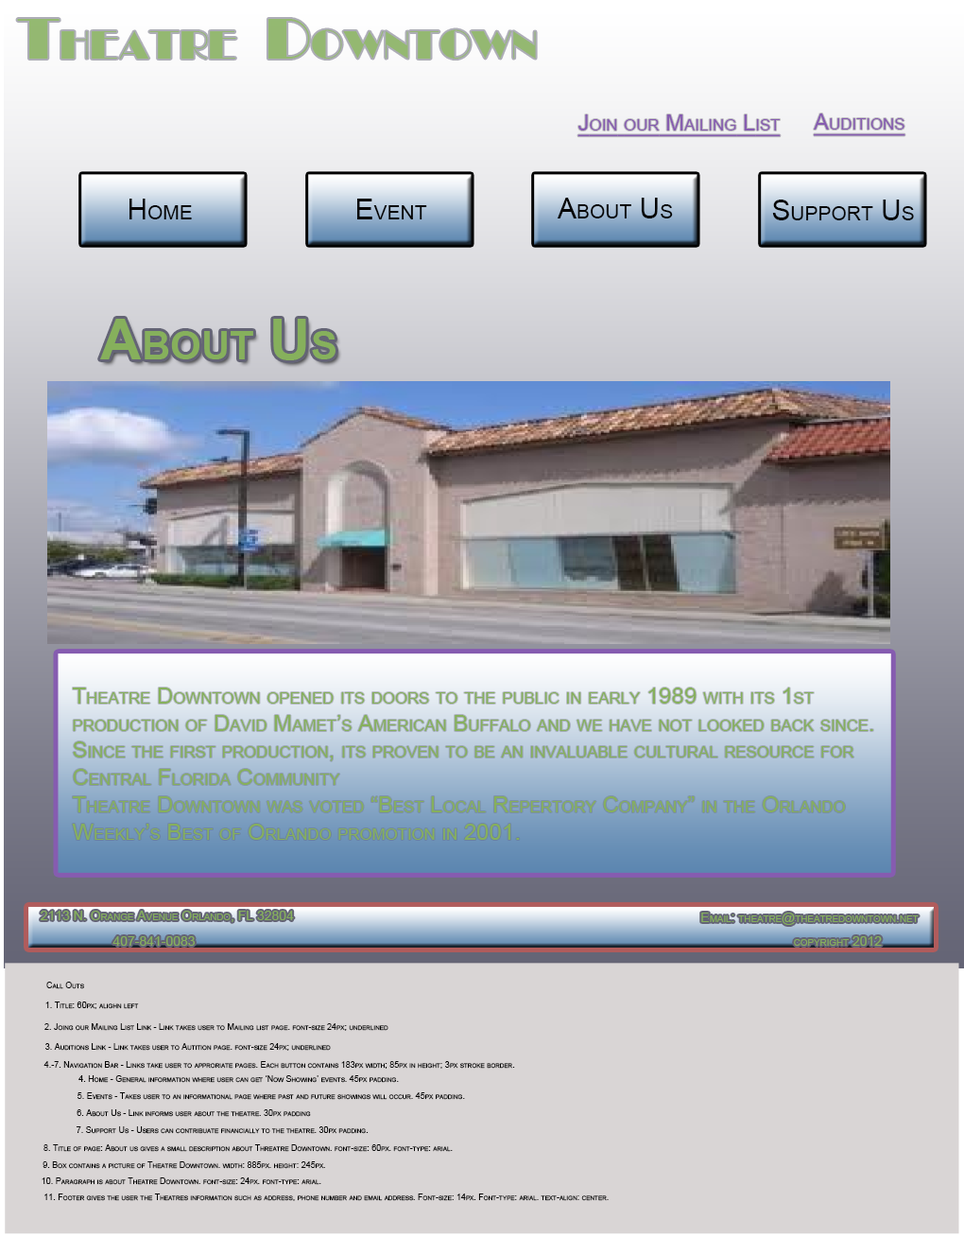
<style>
.page{position:relative;width:964px;height:1237px}
.page>*{position:absolute;margin:0}
.t1{font:56.7px "RitzFLF";color:#94b871;font-variant:small-caps}
.t2{font:22.7px "ArialMT";color:#865cb0;font-variant:small-caps;text-decoration:underline}
.t3{font:28.4px "ArialMT";color:#050505;font-variant:small-caps}
.t4{font:56.7px "Arial-BoldMT";color:#86b05c;font-variant:small-caps}
.t5{font:22.7px "ArialMT";color:#86b05c;font-variant:small-caps}
.t6{font:13.2px "ArialMT";color:#86b05c;font-variant:small-caps}
.t7{font:8.5px "ArialMT";color:#050505;font-variant:small-caps}
</style>
<div class="page">
<p class="t1" style="left:17px;top:19px;width:519px;height:40px">Theatre Downtown</p>
<p class="t2" style="left:814px;top:113px;width:92px;height:23px">Auditions</p>
<p class="t2" style="left:578px;top:114px;width:203px;height:23px">Join our Mailing List</p>
<p class="t3" style="left:557px;top:198px;width:116px;height:20px">About Us</p>
<p class="t3" style="left:130px;top:199px;width:62px;height:20px">Home</p>
<p class="t3" style="left:357px;top:199px;width:70px;height:20px">Event</p>
<p class="t3" style="left:772px;top:199px;width:142px;height:21px">Support Us</p>
<p class="t4" style="left:100px;top:319px;width:236px;height:41px">About Us</p>
<p class="t5" style="left:72px;top:687px;width:802px;height:153px">Theatre Downtown opened its doors to the public in early 1989 with its 1st <br>production of David Mamet’s American Buffalo and we have not looked back since. <br>Since the first production, its proven to be an invaluable cultural resource for <br>Central Florida Community<br>Theatre Downtown was voted “Best Local Repertory Company” in the Orlando <br>Weekly’s Best of Orlando promotion in 2001.</p>
<p class="t6" style="left:41px;top:910px;width:253px;height:12px">2113 N. Orange Avenue Orlando, FL 32804</p>
<p class="t6" style="left:701px;top:912px;width:218px;height:13px">Email: theatre@theatredowntown.net</p>
<p class="t6" style="left:113px;top:936px;width:82px;height:9px">407-841-0083</p>
<p class="t6" style="left:794px;top:936px;width:88px;height:9px">copyright 2012</p>
<p class="t7" style="left:46px;top:981px;width:38px;height:8px">Call Outs</p>
<p class="t7" style="left:45px;top:1001px;width:94px;height:8px">1. Title: 60px; alighn left</p>
<p class="t7" style="left:44px;top:1023px;width:345px;height:7px">2. Joing our Mailing List Link - Link takes user to Mailing list page. font-size 24px; underlined</p>
<p class="t7" style="left:45px;top:1043px;width:286px;height:7px">3. Auditions Link - Link takes user to Autition page. font-size 24px; underlined</p>
<p class="t7" style="left:43px;top:1061px;width:472px;height:7px">4.-7. Navigation Bar - Links take user to approriate pages. Each button contains 183px width; 85px in height; 3px stroke border.</p>
<p class="t7" style="left:78px;top:1075px;width:321px;height:7px">4. Home - General information where user can get ‘Now Showing’ events. 45px padding.</p>
<p class="t7" style="left:78px;top:1092px;width:387px;height:7px">5. Events - Takes user to an informational page where past and future showings will occur. 45px padding.</p>
<p class="t7" style="left:77px;top:1109px;width:234px;height:8px">6. About Us - Link informs user about the theatre. 30px padding</p>
<p class="t7" style="left:77px;top:1126px;width:292px;height:8px">7. Support Us - Users can contribuate financially to the theatre. 30px padding.</p>
<p class="t7" style="left:43px;top:1144px;width:410px;height:7px">8. Title of page: About us gives a small description about Threatre Downtown. font-size: 60px. font-type: arial.</p>
<p class="t7" style="left:43px;top:1161px;width:282px;height:8px">9. Box contains a picture of Theatre Downtown. width: 885px. height: 245px.</p>
<p class="t7" style="left:42px;top:1177px;width:279px;height:8px">10. Paragraph is about Theatre Downtown. font-size: 24px. font-type: arial.</p>
<p class="t7" style="left:44px;top:1193px;width:565px;height:8px">11. Footer gives the user the Theatres information such as address, phone number and email address. Font-size: 14px. Font-type: arial. text-align: center.</p>
</div>
